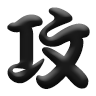
<style>
.page{position:relative;width:96px;height:96px;background:#ffffff}
.page>*{position:absolute;margin:0}
.t1{font:90px "DFPKanTingLiuW9";color:#1a1a1a}
</style>
<div class="page">
<p class="t1" style="left:7px;top:7px;width:83px;height:82px">攻</p>
</div>
